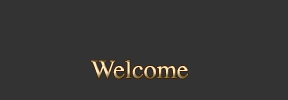
<style>
.page{position:relative;width:288px;height:100px;background:#333333}
.page>*{position:absolute;margin:0}
.t1{font:26px "Times-Roman"}
</style>
<div class="page">
<p class="t1" style="left:91px;top:60px;width:97px;height:19px">Welcome</p>
</div>
